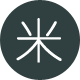
<style>
.page{position:relative;width:80px;height:80px;background:#304040}
.page>*{position:absolute;margin:0}
.t1{font:48px "YouYuan";color:#ffffff}
</style>
<div class="page">
<p class="t1" style="left:16px;top:18px;width:46px;height:45px">米</p>
</div>
